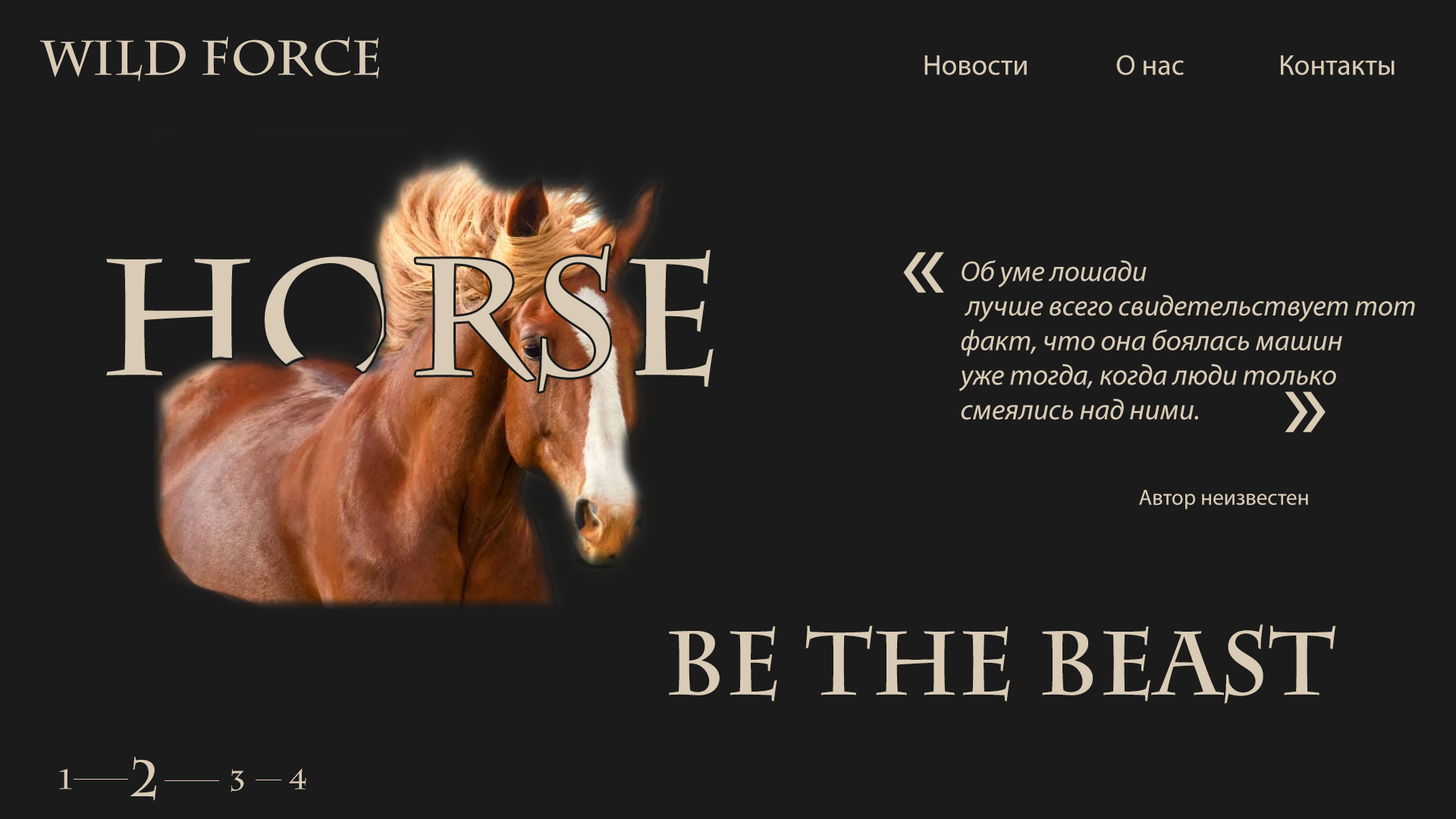
<style>
.page{position:relative;width:1456px;height:819px;background:#1b1b1b}
.page>*{position:absolute;margin:0}
.t1{font:48.5px "CharlemagneStd-Bold";color:#d9cbb5}
.t2{font:28.8px "MyriadPro-Regular";color:#d9cbb5}
.t3{font:109.2px "MyriadPro-Regular";color:#d9cbb5}
.t4{font:28.8px "MyriadPro-It";color:#d9cbb5}
.t5{font:22px "MyriadPro-Regular";color:#d9cbb5}
.t6{font:89.5px "CharlemagneStd-Bold";color:#d9cbb5}
.t7{font:50.8px "CharlemagneStd-Bold";color:#d9cbb5}
.t8{font:27.6px "CharlemagneStd-Bold";color:#d9cbb5}
</style>
<div class="page">
<p class="t1" style="left:39px;top:36px;width:340px;height:45px">wild Force</p>
<p class="t2" style="left:924px;top:55px;width:103px;height:20px">Новости</p>
<p class="t2" style="left:1116px;top:55px;width:68px;height:20px">О нас</p>
<p class="t2" style="left:1281px;top:55px;width:114px;height:20px">Контакты</p>
<p class="t3" style="left:903px;top:252px;width:41px;height:41px">«</p>
<p class="t4" style="left:959px;top:260px;width:456px;height:160px">Об уме лошади<br> лучше всего свидетельствует тот <br>факт, что она боялась машин <br>уже тогда, когда люди только <br>смеялись над ними.</p>
<p class="t3" style="left:1285px;top:391px;width:41px;height:41px">»</p>
<p class="t5" style="left:1139px;top:490px;width:169px;height:20px">Автор неизвестен</p>
<p class="t6" style="left:669px;top:624px;width:666px;height:80px">Be The Beast</p>
<p class="t7" style="left:130px;top:757px;width:26px;height:44px">2</p>
<p class="t8" style="left:59px;top:769px;width:13px;height:20px">1</p>
<p class="t8" style="left:231px;top:769px;width:13px;height:23px">3</p>
<p class="t8" style="left:289px;top:768px;width:17px;height:21px">4</p>
</div>
